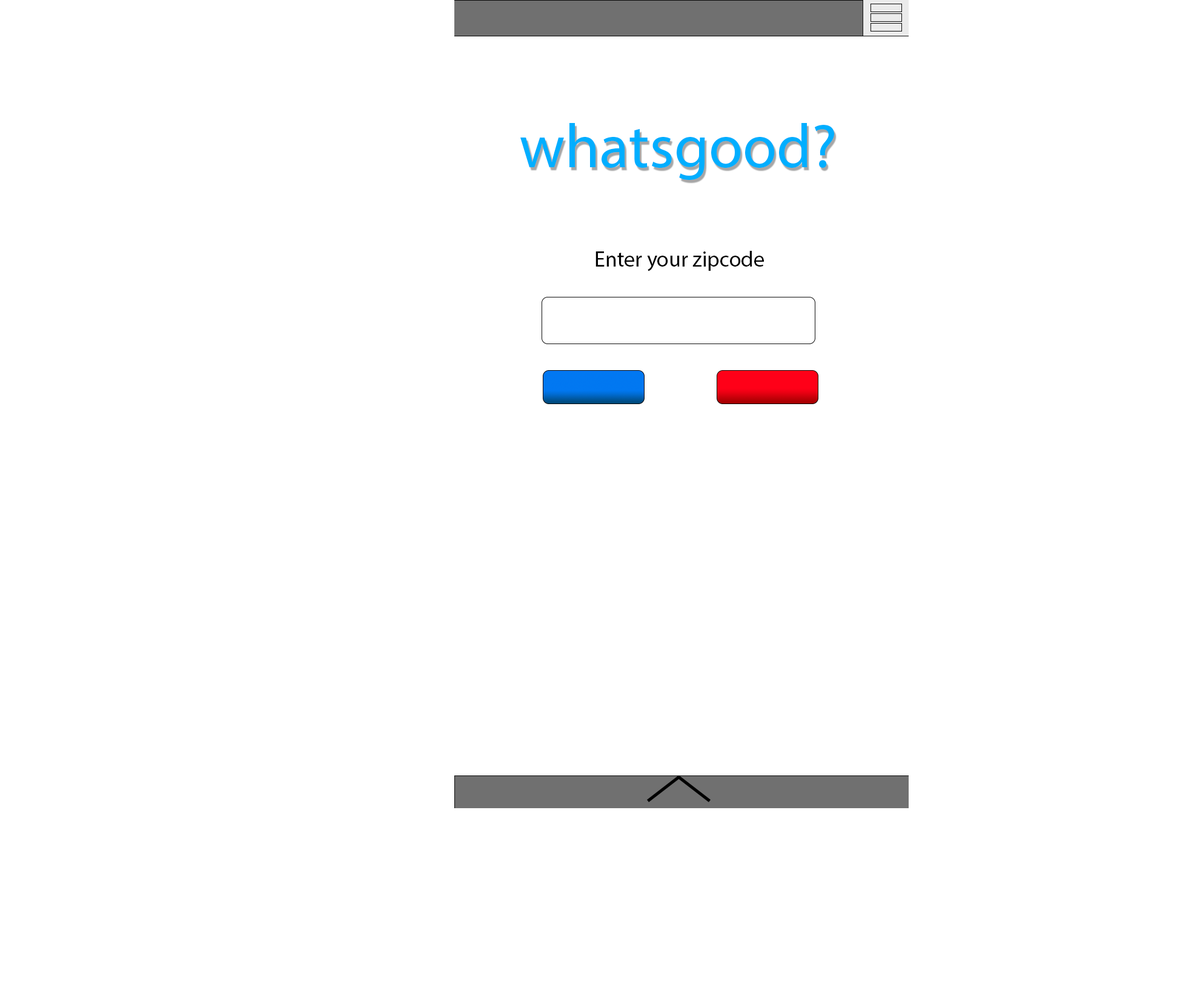
<style>
.page{position:relative;width:1197px;height:996px;background:#ffffff}
.page>*{position:absolute;margin:0}
.t1{font:62px "MyriadPro-Regular";color:#00aeff}
.t2{font:21.8px "MyriadPro-Regular";color:#000000}
</style>
<div class="page">
<p class="t1" style="left:520px;top:123px;width:314px;height:57px">whatsgood?</p>
<p class="t2" style="left:596px;top:251px;width:168px;height:20px">Enter your zipcode</p>
</div>
